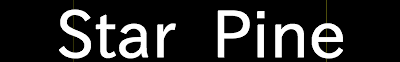
<style>
.page{position:relative;width:400px;height:62px;background:#000000}
.page>*{position:absolute;margin:0}
.t1{font:72px "FontopoNIHONGO";color:#ffffff}
</style>
<div class="page">
<p class="t1" style="left:59px;top:9px;width:284px;height:50px">Star Pine</p>
</div>
